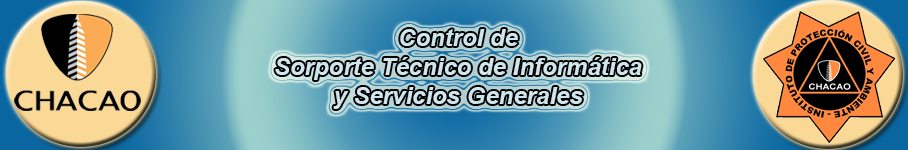
<style>
.page{position:relative;width:908px;height:150px}
.page>*{position:absolute;margin:0}
.t1{font:24px "Arial-BoldItalicMT";color:#cee6ee}
</style>
<div class="page">
<p class="t1" style="left:275px;top:29px;width:367px;height:80px;text-align:center">Control de <br>Sorporte Técnico de Informática <br>y Servicios Generales</p>
</div>
